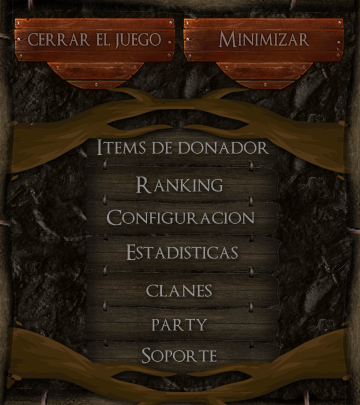
<style>
.page{position:relative;width:360px;height:405px}
.page>*{position:absolute;margin:0}
.t1{font:21.7px "OptimusPrinceps";color:#867069;scale:0.89 1}
.t2{font:21.7px "OptimusPrinceps";color:#877168;scale:0.89 1}
.t3{font:21px "OptimusPrinceps";color:#92908d;scale:1.04 1}
.t4{font:21.9px "OptimusPrinceps";color:#92918d}
.t5{font:20.1px "OptimusPrinceps";color:#91908d;scale:1.07 1}
.t6{font:21px "OptimusPrinceps";color:#93918e}
.t7{font:21px "OptimusPrinceps";color:#92908d;scale:1.1 1}
.t8{font:21px "OptimusPrinceps";color:#908f8c}
.t9{font:20.1px "OptimusPrinceps";color:#92908d;scale:1.07 1}
</style>
<div class="page">
<p class="t1" style="left:218px;top:30px;width:92px;height:18px">Minimizar</p>
<p class="t2" style="left:28px;top:32px;width:133px;height:18px">cerrar el juego</p>
<p class="t3" style="left:97px;top:139px;width:173px;height:17px">Items de donador</p>
<p class="t4" style="left:136px;top:176px;width:87px;height:18px">Ranking</p>
<p class="t5" style="left:106px;top:209px;width:149px;height:17px">Configuracion</p>
<p class="t6" style="left:126px;top:244px;width:112px;height:17px">Estadisticas</p>
<p class="t7" style="left:146px;top:284px;width:66px;height:13px">clanes</p>
<p class="t8" style="left:151px;top:318px;width:57px;height:13px">party</p>
<p class="t9" style="left:141px;top:347px;width:76px;height:17px">Soporte</p>
</div>
